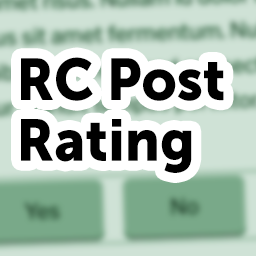
<style>
.page{position:relative;width:256px;height:256px;background:#ffffff}
.page>*{position:absolute;margin:0}
.t1{font:58.2px/60.7px "MuseoSans-900";color:#000000;scale:0.95 1}
</style>
<div class="page">
<p class="t1" style="left:21px;top:57px;width:203px;height:116px">RC Post<br>Rating</p>
</div>
